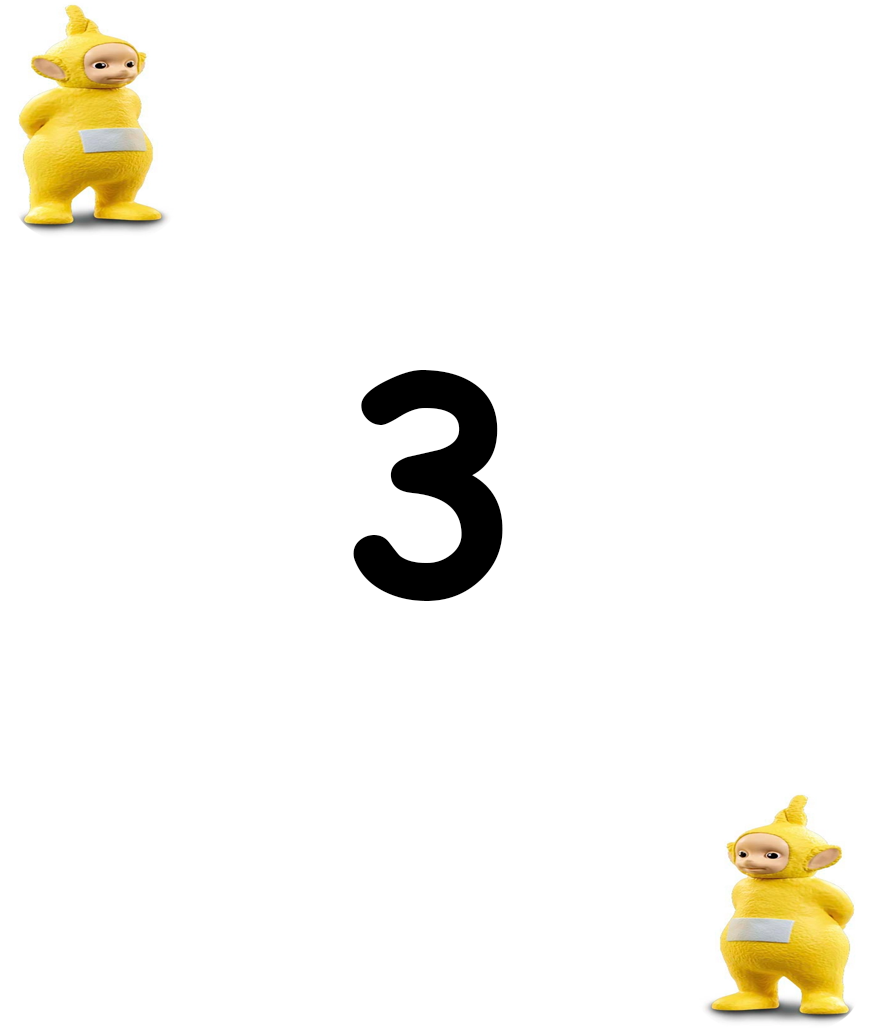
<style>
.page{position:relative;width:873px;height:1036px;background:#ffffff}
.page>*{position:absolute;margin:0}
.t1{font:300px "ComicSansMS-Bold";color:#000000;font-variant:small-caps}
</style>
<div class="page">
<p class="t1" style="left:353px;top:370px;width:150px;height:231px">3</p>
</div>
